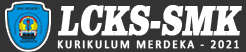
<style>
.page{position:relative;width:246px;height:52px;background:#333333}
.page>*{position:absolute;margin:0}
.t1{font:43.6px "ClarendonBT-Black";color:#ffffff;font-weight:bold;font-style:italic;scale:0.68 1}
.t2{font:12px "Calibri";letter-spacing:0.15em;color:#ffffff;font-weight:bold;scale:0.94 1}
</style>
<div class="page">
<p class="t1" style="left:58px;top:5px;width:184px;height:31px">LCKS-SMK</p>
<p class="t2" style="left:57px;top:40px;width:182px;height:9px">KURIKULUM MERDEKA - 2021</p>
</div>
